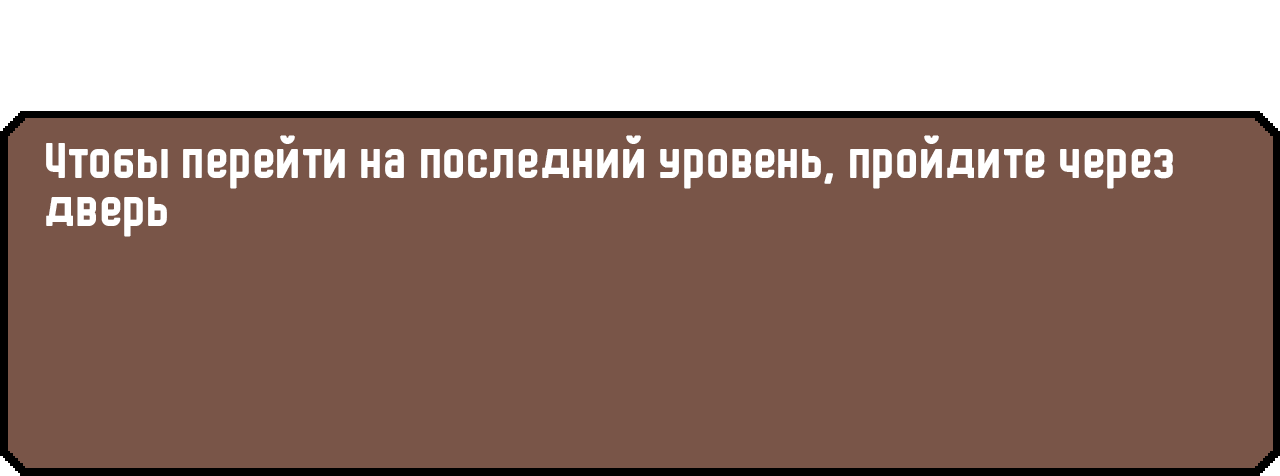
<style>
.page{position:relative;width:1280px;height:476px;background:#795548}
.page>*{position:absolute;margin:0}
.t1{font:48px/48px "HermanoMayor";color:#ffffff}
</style>
<div class="page">
<p class="t1" style="left:46px;top:135px;width:1127px;height:102px">Чтобы перейти на последний уровень, пройдите через дверь</p>
</div>
